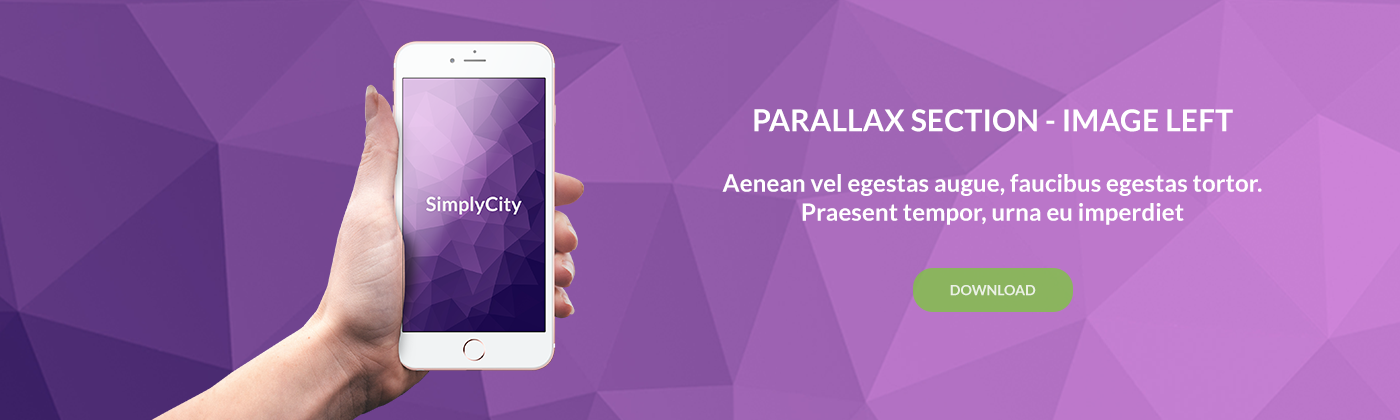
<style>
.page{position:relative;width:1400px;height:420px}
.page>*{position:absolute;margin:0}
.t1{font:30px "Lato-Bold";letter-spacing:0.005em;color:#ffffff}
.t2{font:24px "Lato-Bold";letter-spacing:0.005em;color:#ffffff}
.t3{font:14px "Lato-Bold";color:#ebf1e5}
</style>
<div class="page">
<p class="t1" style="left:754px;top:109px;width:479px;height:23px">PARALLAX SECTION - IMAGE LEFT</p>
<p class="t2" style="left:722px;top:174px;width:540px;height:51px;text-align:center">Aenean vel egestas augue, faucibus egestas tortor. Praesent tempor, urna eu imperdiet</p>
<p class="t3" style="left:950px;top:285px;width:86px;height:11px">DOWNLOAD</p>
</div>
